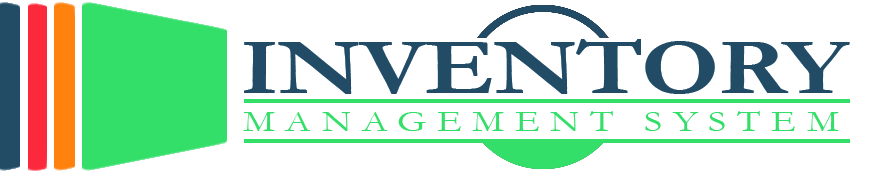
<style>
.page{position:relative;width:875px;height:171px;background:#ffffff}
.page>*{position:absolute;margin:0}
.t1{font:79.2px "Garamond-Bold";letter-spacing:-0.01em;color:#224b65;scale:1.25 1}
.t2{font:30.8px "Garamond";letter-spacing:0.27em;color:#33df68;scale:1.25 1}
</style>
<div class="page">
<p class="t1" style="left:244px;top:39px;width:606px;height:55px">INVENTORY</p>
<p class="t2" style="left:243px;top:111px;width:596px;height:20px">MANAGEMENT SYSTEM</p>
</div>
